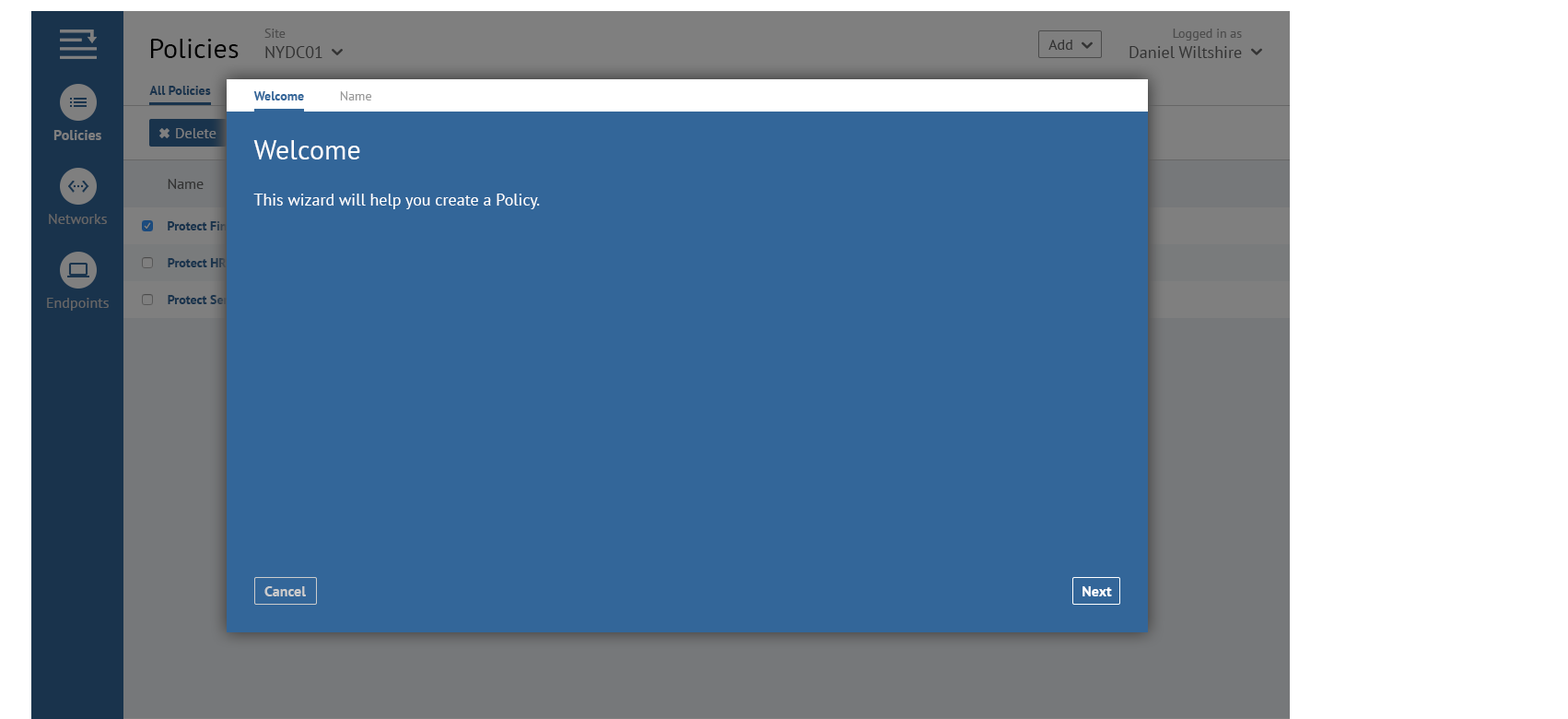
<style>
.page{position:relative;width:1568px;height:719px;background:#336699}
.page>*{position:absolute;margin:0}
.t1{font:16.6px "PTSans-Regular"}
.t2{font:12.9px "PTSans-Regular"}
.t3{font:16.8px "PTSans-Regular"}
.t4{font:13.1px "PTSans-Regular"}
.t5{font:27.6px "PTSans-Regular";color:#000000}
.t6{font:14.7px "PTSans-Regular";color:#333333}
.t7{font:12.8px "PTSans-Bold";color:#19334c}
.t8{font:12.8px "PTSans-Bold";color:#336699}
.t9{font:12.8px "PTSans-Regular";color:#999999}
.t10{font:14.7px "PTSans-Bold";color:#7f7f7f}
.t11{font:14.7px "PTSans-Regular";color:#7f7f7f}
.t12{font:27.6px "PTSans-Regular";color:#ffffff}
.t13{font:16.6px "PTSans-Regular";color:#ffffff}
.t14{font:14.7px "PTSans-Regular";color:#666666}
.t15{font:12.9px "PTSans-Bold"}
.t16{font:12.9px "PTSans-Bold";color:#19334c}
.t17{font:14.7px "PTSans-Bold";color:#cccccc}
.t18{font:14.7px "PTSans-Bold";color:#ffffff}
</style>
<div class="page">
<p class="t1" style="left:264px;top:29px;width:58px;height:29px"><span class="t2">Site<br></span>NYDC01</p>
<p class="t3" style="left:1129px;top:29px;width:113px;height:29px;text-align:right"><span class="t4">Logged in as<br></span>Daniel Wiltshire</p>
<p class="t5" style="left:151px;top:39px;width:88px;height:19px">Policies</p>
<p class="t6" style="left:1048px;top:40px;width:24px;height:10px">Add</p>
<p class="t7" style="left:149px;top:86px;width:62px;height:9px">All Policies</p>
<p class="t8" style="left:253px;top:91px;width:51px;height:9px">Welcome</p>
<p class="t9" style="left:340px;top:91px;width:31px;height:9px">Name</p>
<p class="t10" style="left:53px;top:130px;width:48px;height:10px">Policies</p>
<p class="t11" style="left:176px;top:128px;width:40px;height:10px">Delete</p>
<p class="t12" style="left:253px;top:140px;width:107px;height:19px">Welcome</p>
<p class="t6" style="left:168px;top:179px;width:36px;height:10px">Name</p>
<p class="t13" style="left:253px;top:193px;width:287px;height:16px">This wizard will help you create a Policy.</p>
<p class="t14" style="left:49px;top:214px;width:58px;height:10px">Networks</p>
<p class="t15" style="left:168px;top:221px;width:84px;height:9px">Protect Finance</p>
<p class="t16" style="left:168px;top:258px;width:59px;height:9px">Protect HR</p>
<p class="t14" style="left:47px;top:298px;width:62px;height:12px">Endpoints</p>
<p class="t15" style="left:168px;top:295px;width:83px;height:9px">Protect Servers</p>
<p class="t17" style="left:264px;top:586px;width:42px;height:10px">Cancel</p>
<p class="t18" style="left:1082px;top:586px;width:30px;height:10px">Next</p>
</div>
